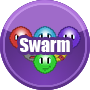
<style>
.page{position:relative;width:90px;height:90px;background:#ffffff}
.page>*{position:absolute;margin:0}
.t1{font:18px "Impact";color:#ffffff}
</style>
<div class="page">
<p class="t1" style="left:19px;top:38px;width:51px;height:14px">Swarm</p>
</div>
